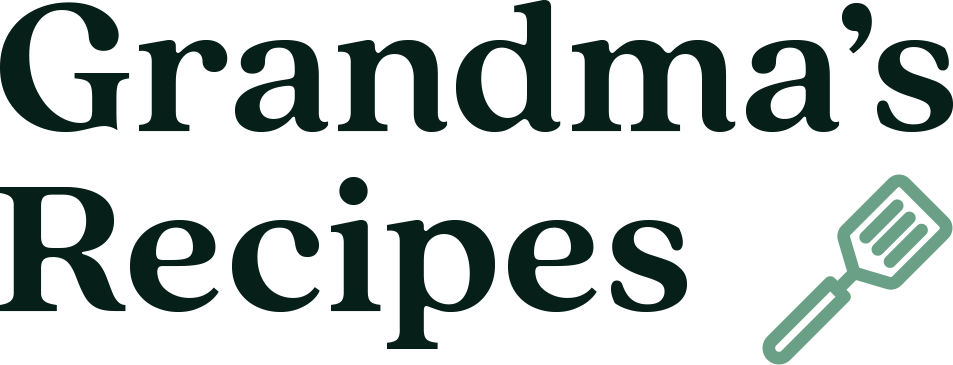
<style>
.page{position:relative;width:953px;height:365px;background:#ffffff}
.page>*{position:absolute;margin:0}
.t1{font:200px/180px "QuincyCF-Bold";color:#061f18}
</style>
<div class="page">
<p class="t1" style="left:0px;top:0px;width:953px;height:349px">Grandma’s<br>Recipes</p>
</div>
